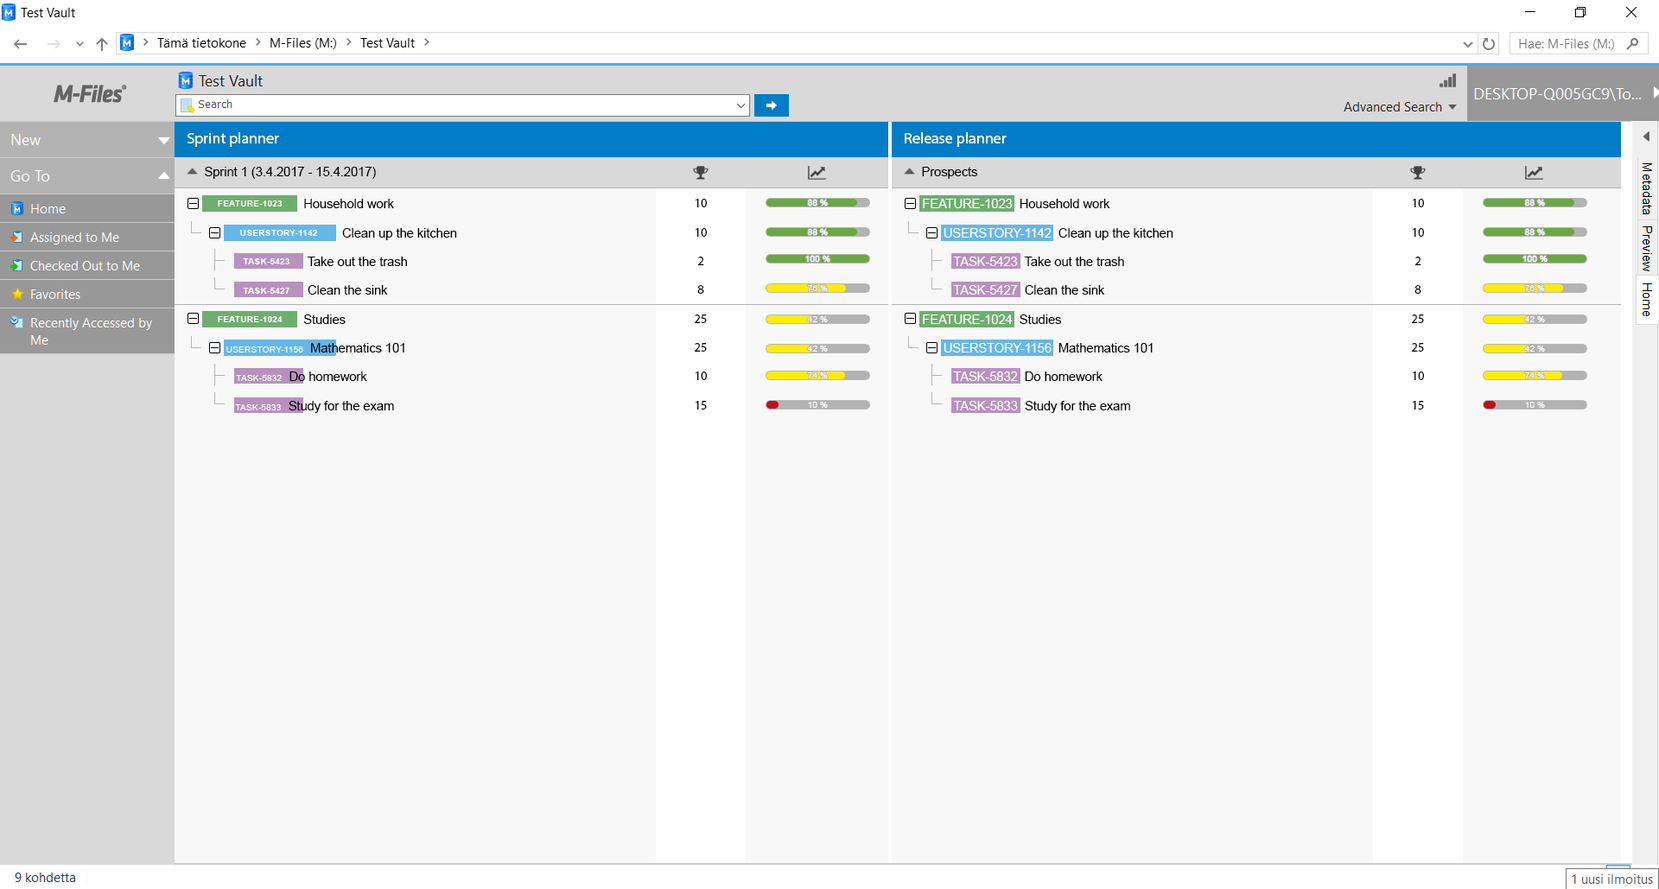
<style>
.page{position:relative;width:1659px;height:889px;background:#f8f8f8}
.page>*{position:absolute;margin:0}
.t1{font:15.5px "MyriadPro-Regular";color:#ffffff}
.t2{font:12.6px "ArialMT";color:#000000}
.t3{font:12.6px/28.8px "ArialMT";color:#000000}
.t4{font:9px/28.8px "Arial-BoldMT";color:#ffffff}
.t5{font:9px/28.8px "ArialMT";color:#ffffff}
.t6{font:12.6px/28.8px "MyriadPro-Regular";color:#000000}
.t7{font:9px "ArialMT";color:#ffffff}
.t8{font:12.6px/28.8px "ArialMT";color:#ffffff}
</style>
<div class="page">
<p class="t1" style="left:187px;top:132px;width:92px;height:15px">Sprint planner</p>
<p class="t1" style="left:905px;top:132px;width:102px;height:15px">Release planner</p>
<p class="t2" style="left:205px;top:167px;width:171px;height:12px">Sprint 1 (3.4.2017 - 15.4.2017)</p>
<p class="t2" style="left:922px;top:167px;width:56px;height:12px">Prospects</p>
<p class="t3" style="left:218px;top:199px;width:239px;height:214px"><span class="t4">     FEATURE-1023</span>      Household work<br>          <span class="t4">USERSTORY-1142       </span>Clean up the kitchen<br>   <span class="t4">TASK-5423    </span> Take out the trash<br>   <span class="t4">TASK-5427    </span> Clean the sink<br><span class="t4">     FEATURE-1024      </span>Studies<br>      <span class="t5">USERSTORY-1156</span>  Mathematics 101<br> <span class="t5">TASK-5832</span>  Do homework<br>         <span class="t5">TASK-5833</span>  Study for the exam</p>
<p class="t6" style="left:695px;top:199px;width:12px;height:211px;text-align:center">10<br>10<br>2<br>8<br>25<br>25<br>10<br>15</p>
<p class="t7" style="left:808px;top:200px;width:20px;height:6px">88 %</p>
<p class="t3" style="left:923px;top:199px;width:250px;height:214px"><span class="t8">FEATURE-1023</span>  Household work<br>      <span class="t8">USERSTORY-1142</span>  Clean up the kitchen<br> <span class="t8">TASK-5423</span>  Take out the trash<br> <span class="t8">TASK-5427</span>  Clean the sink<br><span class="t8">FEATURE-1024</span>  Studies<br>      <span class="t8">USERSTORY-1156</span>  Mathematics 101<br> <span class="t8">TASK-5832</span>  Do homework<br>         <span class="t8">TASK-5833</span>  Study for the exam</p>
<p class="t6" style="left:1412px;top:199px;width:12px;height:211px;text-align:center">10<br>10<br>2<br>8<br>25<br>25<br>10<br>15</p>
<p class="t7" style="left:1525px;top:200px;width:20px;height:6px">88 %</p>
<p class="t7" style="left:808px;top:229px;width:20px;height:6px">88 %</p>
<p class="t7" style="left:1525px;top:229px;width:20px;height:6px">88 %</p>
<p class="t7" style="left:805px;top:256px;width:25px;height:6px">100 %</p>
<p class="t7" style="left:1522px;top:256px;width:25px;height:6px">100 %</p>
<p class="t7" style="left:808px;top:285px;width:20px;height:6px">76 %</p>
<p class="t7" style="left:1525px;top:285px;width:20px;height:6px">76 %</p>
<p class="t7" style="left:807px;top:316px;width:21px;height:6px">42 %</p>
<p class="t7" style="left:1524px;top:316px;width:21px;height:6px">42 %</p>
<p class="t7" style="left:807px;top:346px;width:21px;height:6px">42 %</p>
<p class="t7" style="left:1524px;top:346px;width:21px;height:6px">42 %</p>
<p class="t7" style="left:808px;top:372px;width:20px;height:6px">74 %</p>
<p class="t7" style="left:1525px;top:372px;width:20px;height:6px">74 %</p>
<p class="t7" style="left:808px;top:402px;width:20px;height:6px">10 %</p>
<p class="t7" style="left:1525px;top:402px;width:20px;height:6px">10 %</p>
</div>
